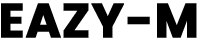
<style>
.page{position:relative;width:200px;height:40px;background:#ffffff}
.page>*{position:absolute;margin:0}
.t1{font:48px "Poppins-Bold";color:#000000;font-weight:bold}
</style>
<div class="page">
<p class="t1" style="left:1px;top:3px;width:196px;height:35px">EAZY-M</p>
</div>
